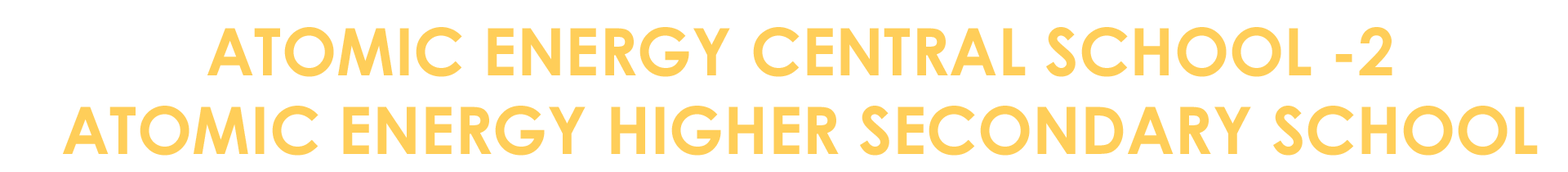
<style>
.page{position:relative;width:1568px;height:172px;background:#ffffff}
.page>*{position:absolute;margin:0}
.t1{font:65.3px "CenturyGothic-Bold";color:#ffce59}
</style>
<div class="page">
<p class="t1" style="left:63px;top:27px;width:1475px;height:128px;text-align:center">ATOMIC ENERGY CENTRAL SCHOOL -2<br>ATOMIC ENERGY HIGHER SECONDARY SCHOOL</p>
</div>
